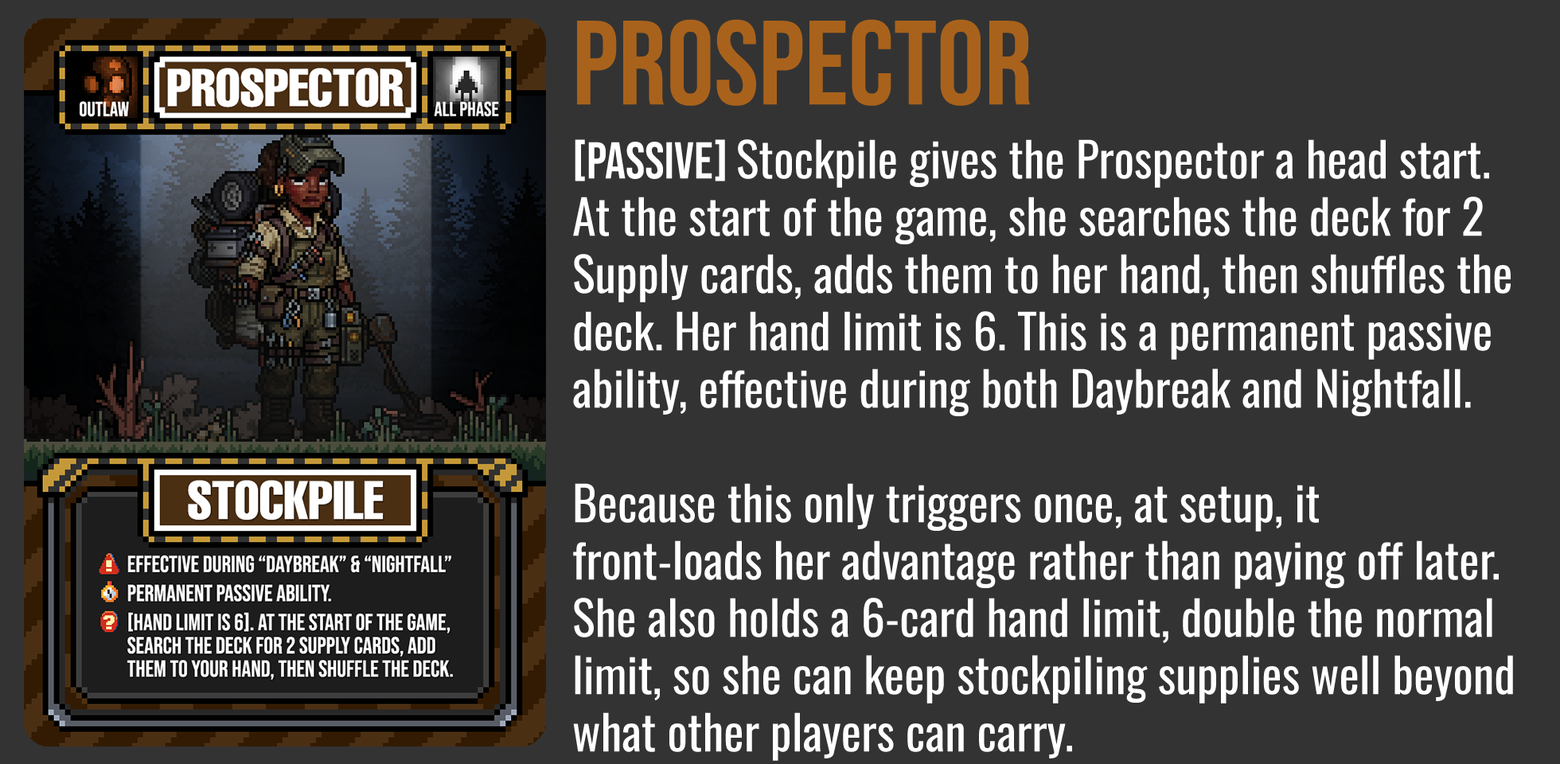
<style>
.page{position:relative;width:1560px;height:764px;background:#333333}
.page>*{position:absolute;margin:0}
.t1{font:119.4px "BebasNeue-Regular";color:#a9621b}
.t2{font:47.8px "Oswald-Regular";color:#ffffff}
.t3{font:51.7px "BebasNeue-Regular";color:#ffffff}
</style>
<div class="page">
<p class="t1" style="left:577px;top:19px;width:453px;height:87px">PROSPECTOR</p>
<p class="t2" style="left:573px;top:139px;width:940px;height:622px"><span class="t3">[PASSIVE] </span>Stockpile gives the Prospector a head start. At the start of the game, she searches the deck for 2 Supply cards, adds them to her hand, then shuffles the deck. Her hand limit is 6. This is a permanent passive ability, effective during both Daybreak and Nightfall.<br><br>Because this only triggers once, at setup, it front-loads her advantage rather than paying off later. She also holds a 6-card hand limit, double the normal limit, so she can keep stockpiling supplies well beyond what other players can carry.</p>
</div>
